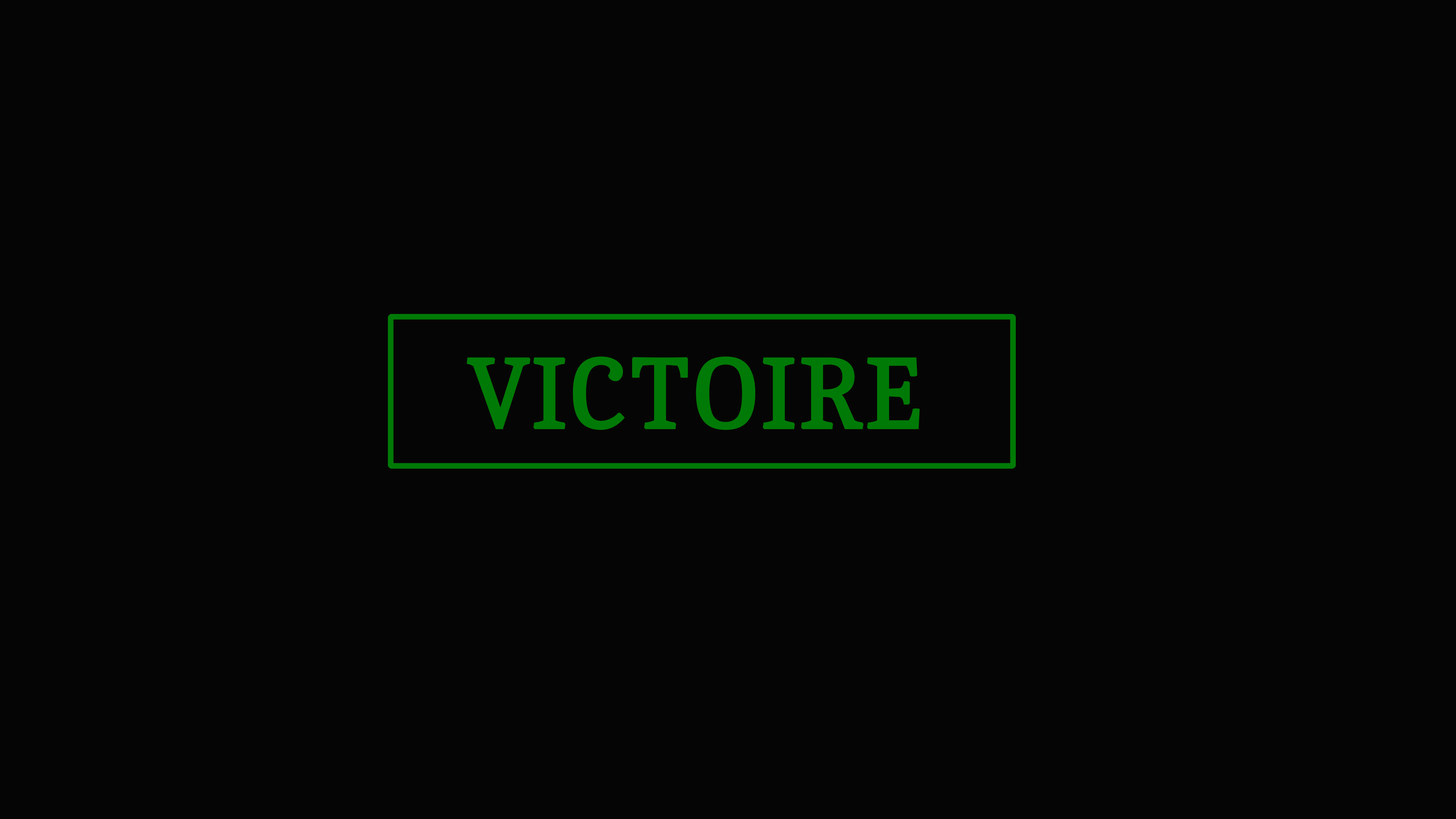
<style>
.page{position:relative;width:1456px;height:819px;background:#060505}
.page>*{position:absolute;margin:0}
.t1{font:103.1px "Caladea-Regular";color:#007a06;font-weight:bold}
</style>
<div class="page">
<p class="t1" style="left:467px;top:356px;width:453px;height:74px">VICTOIRE</p>
</div>
